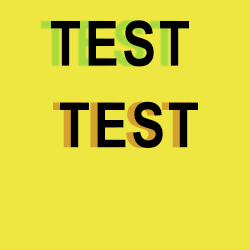
<style>
.page{position:relative;width:250px;height:250px;background:#eee641}
.page>*{position:absolute;margin:0}
.t1{font:62.5px "ArialNarrow-Bold";letter-spacing:0.05em;color:#000000;text-transform:uppercase}
</style>
<div class="page">
<p class="t1" style="left:51px;top:20px;width:138px;height:47px">Test</p>
<p class="t1" style="left:60px;top:101px;width:138px;height:47px">Test</p>
</div>
